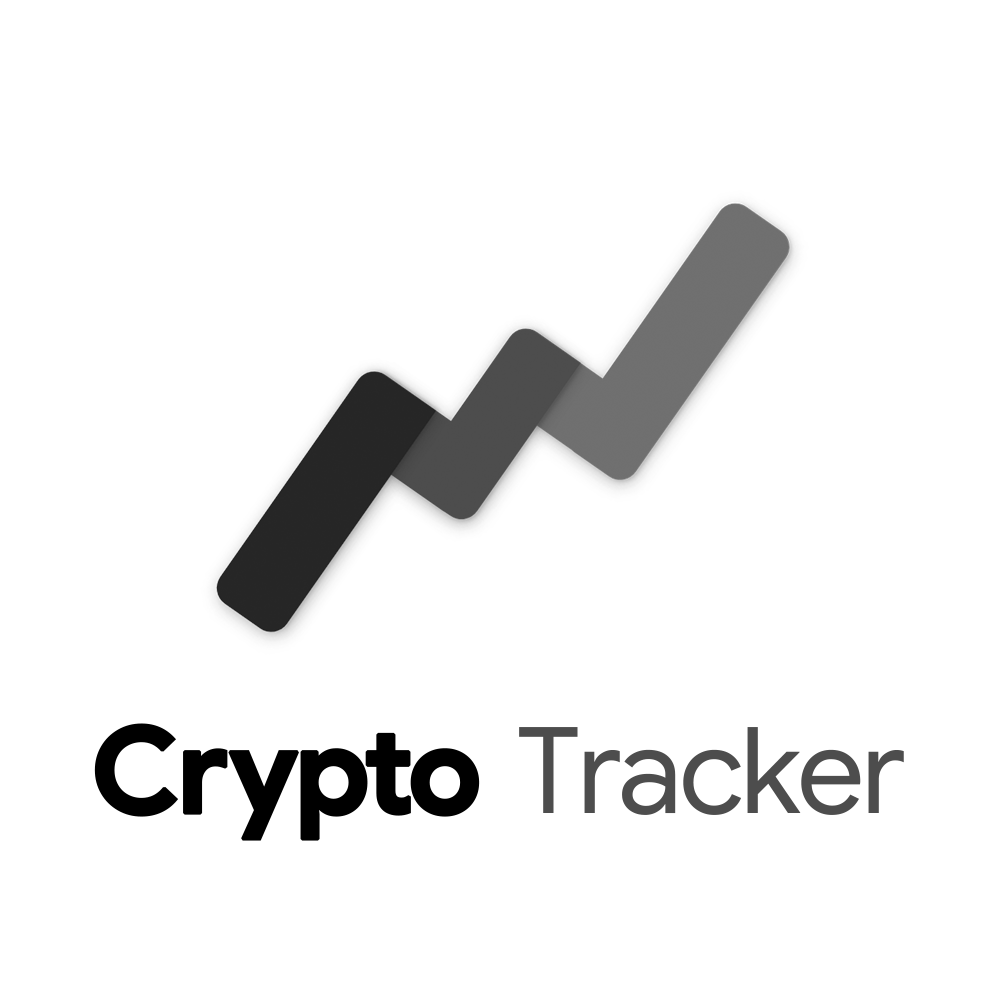
<style>
.page{position:relative;width:1000px;height:1000px;background:#ffffff}
.page>*{position:absolute;margin:0}
.t1{font:120px "GoogleSans-Regular";color:#4d4d4d}
.t2{font:120px "GoogleSans-Bold";color:#000000;font-weight:bold}
</style>
<div class="page">
<p class="t1" style="left:94px;top:723px;width:810px;height:118px"><span class="t2">Crypto </span>Tracker</p>
</div>
